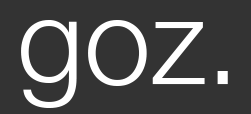
<style>
.page{position:relative;width:251px;height:114px;background:#333333}
.page>*{position:absolute;margin:0}
.t1{font:120px "HelveticaNeue-Light";color:#ffffff}
</style>
<div class="page">
<p class="t1" style="left:21px;top:20px;width:207px;height:88px">goz.</p>
</div>
